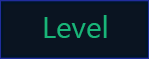
<style>
.page{position:relative;width:149px;height:59px;background:#0a1421}
.page>*{position:absolute;margin:0}
.t1{font:30px "SegoeUISymbol";color:#19b579}
</style>
<div class="page">
<p class="t1" style="left:44px;top:15px;width:63px;height:23px">Level</p>
</div>
